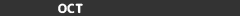
<style>
.page{position:relative;width:240px;height:16px;background:#333333}
.page>*{position:absolute;margin:0}
.t1{font:12.5px "RoundedMplus1c-ExtraBold";color:#ffffff}
</style>
<div class="page">
<p class="t1" style="left:58px;top:3px;width:25px;height:11px">OCT</p>
</div>
